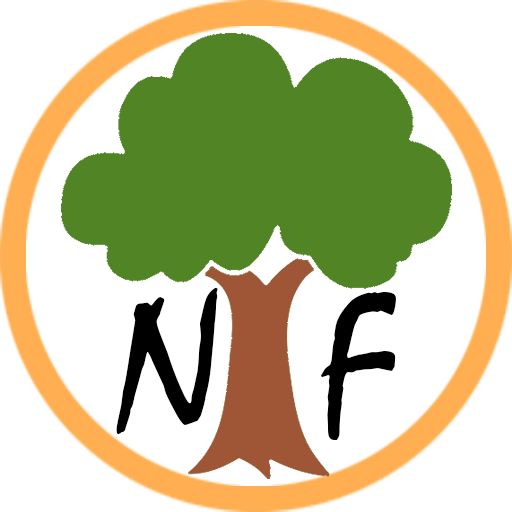
<style>
.page{position:relative;width:512px;height:512px;background:#ffffff}
.page>*{position:absolute;margin:0}
.t1{font:198px "Mistral";color:#000000}
</style>
<div class="page">
<p class="t1" style="left:116px;top:288px;width:280px;height:152px">N  F</p>
</div>
